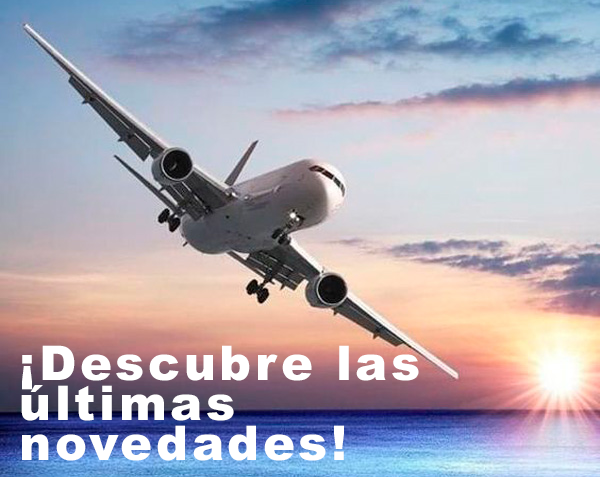
<style>
.page{position:relative;width:600px;height:477px}
.page>*{position:absolute;margin:0}
.t1{font:48px/40px "Arial-Black";letter-spacing:0.075em;color:#ffffff}
</style>
<div class="page">
<p class="t1" style="left:21px;top:345px;width:398px;height:116px">¡Descubre las últimas novedades!</p>
</div>
